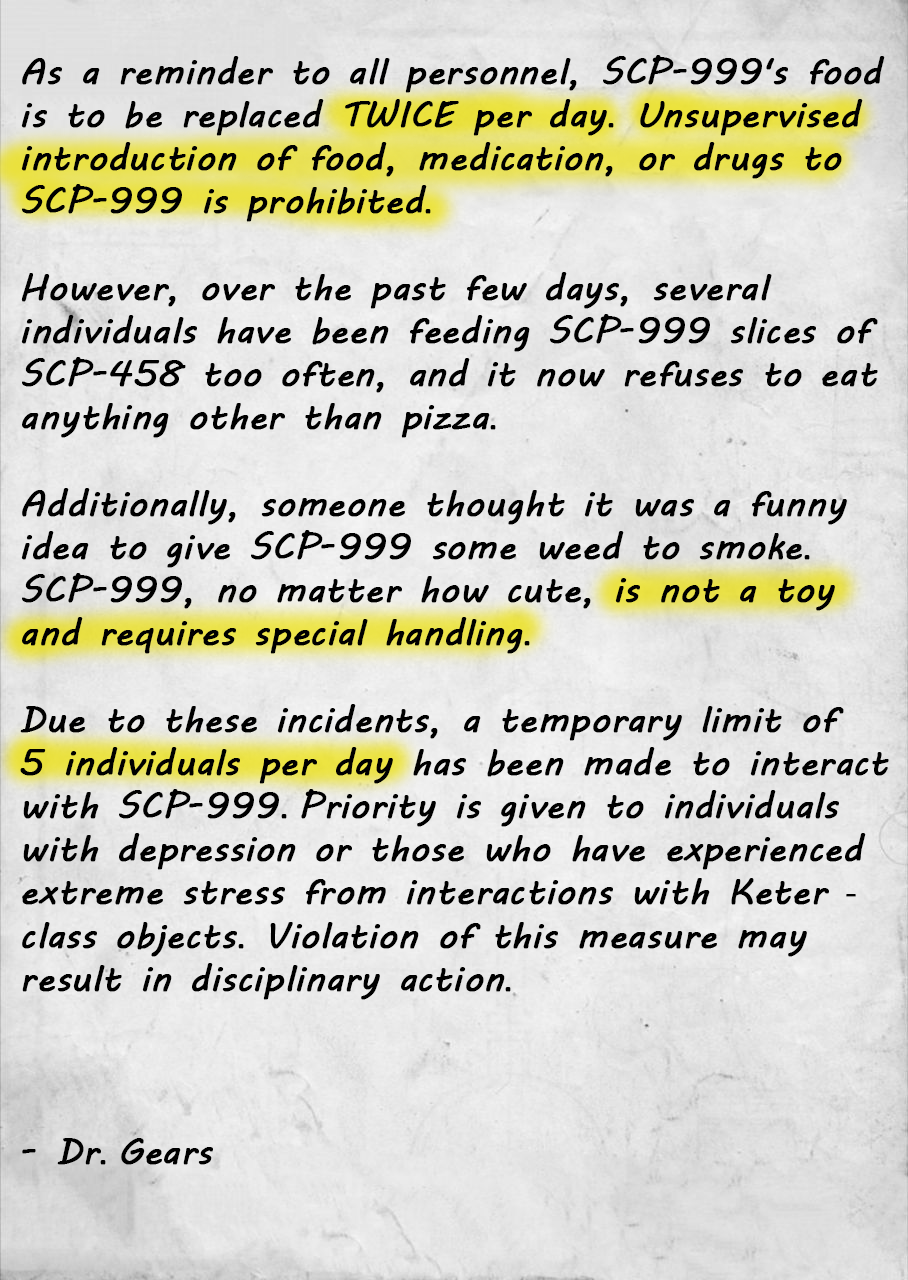
<style>
.page{position:relative;width:908px;height:1280px}
.page>*{position:absolute;margin:0}
.t1{font:36px "MVBoli";color:#000000;font-weight:bold}
.t2{font:36px "Calibri";color:#000000;font-weight:bold}
</style>
<div class="page">
<p class="t1" style="left:20px;top:55px;width:869px;height:1110px">As a reminder to all personnel, SCP-999's food is to be replaced TWICE per day<span class="t2">.</span> Unsupervised introduction of food, medication, or drugs to SCP-999 is prohibited<span class="t2">. <br></span><br>However, over the past few days, several individuals have been feeding SCP-999 slices of SCP-458 too often, and it now refuses to eat anything other than pizza<span class="t2">.</span> <br><br>Additionally, someone thought it was a funny idea to give SCP-999 some weed to smoke<span class="t2">.</span> SCP-999, no matter how cute, is not a toy and requires special handling<span class="t2">.<br></span><br>Due to these incidents, a temporary limit of  5 individuals per day has been made to interact with SCP-999<span class="t2">. </span>Priority is given to individuals with depression or those who have experienced extreme stress from interactions with Keter <span class="t2">- </span>class objects<span class="t2">.</span> Violation of this measure may result in disciplinary action<span class="t2">.<br><br><br><br></span>- Dr<span class="t2">. </span>Gears</p>
</div>
